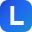
<style>
.page{position:relative;width:32px;height:32px}
.page>*{position:absolute;margin:0}
.t1{font:26px "Arial-BoldMT";color:#ffffff}
</style>
<div class="page">
<p class="t1" style="left:10px;top:6px;width:14px;height:19px">L</p>
</div>
